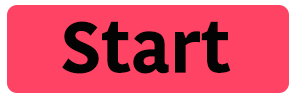
<style>
.page{position:relative;width:300px;height:100px;background:#fe4365}
.page>*{position:absolute;margin:0}
.t1{font:72px "KohinoorDevanagari-Bold";color:#030303}
</style>
<div class="page">
<p class="t1" style="left:62px;top:21px;width:169px;height:53px">Start</p>
</div>
